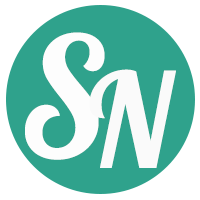
<style>
.page{position:relative;width:200px;height:200px;background:#2fa28c}
.page>*{position:absolute;margin:0}
.t1{font:164.3px "Lobster-Regular";color:#fdfdfd;scale:0.93 1}
.t2{font:130.3px "Lobster-Regular";color:#fafafa;scale:0.93 1}
</style>
<div class="page">
<p class="t1" style="left:25px;top:32px;width:80px;height:128px">S</p>
<p class="t2" style="left:89px;top:69px;width:87px;height:99px">N</p>
</div>
